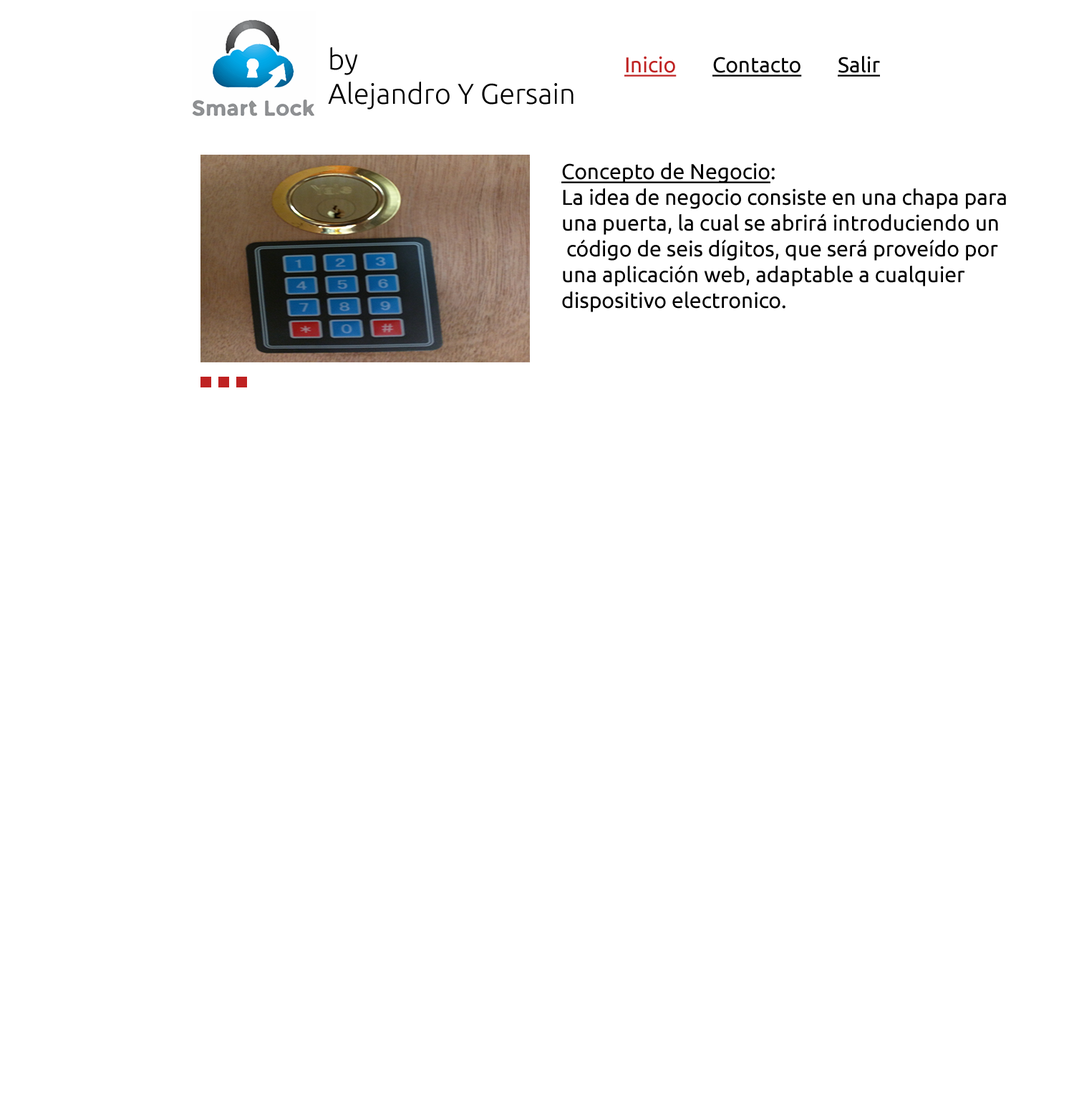
<style>
.page{position:relative;width:1074px;height:1110px;background:#ffffff}
.page>*{position:absolute;margin:0}
.t1{font:28.6px "Ubuntu-Light";color:#000000}
.t2{font:21.5px "Ubuntu";color:#bf2222;text-decoration:underline}
.t3{font:21.5px "Ubuntu";color:#000000;text-decoration:underline}
.t4{font:21.5px "Ubuntu";color:#000000}
</style>
<div class="page">
<p class="t1" style="left:328px;top:47px;width:246px;height:63px;text-align:right">by<br>Alejandro Y Gersain</p>
<p class="t2" style="left:624px;top:56px;width:53px;height:21px">Inicio</p>
<p class="t3" style="left:713px;top:57px;width:89px;height:20px">Contacto</p>
<p class="t3" style="left:838px;top:56px;width:42px;height:21px">Salir</p>
<p class="t4" style="left:561px;top:163px;width:445px;height:149px;text-align:right">:<span class="t3">Concepto de Negocio<br></span>La idea de negocio consiste en una chapa para<br> una puerta, la cual se abrirá introduciendo un<br>código de seis dígitos, que será proveído por <br>una aplicación web, adaptable a cualquier<br>.dispositivo electronico</p>
</div>
